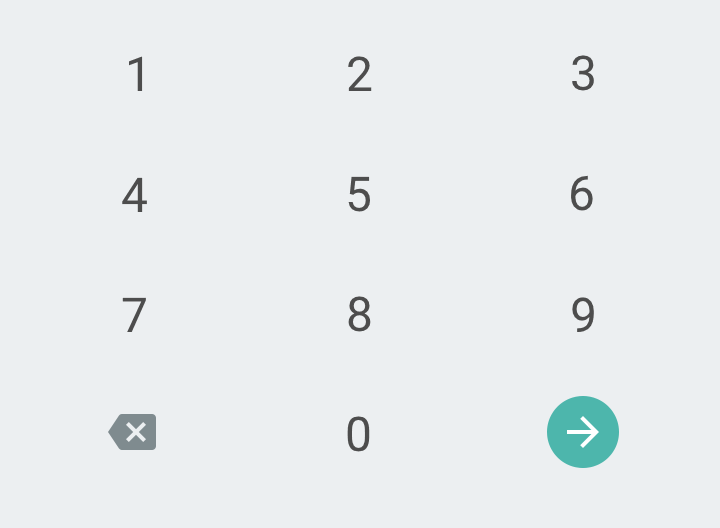
<style>
.page{position:relative;width:720px;height:528px;background:#eceff1}
.page>*{position:absolute;margin:0}
.t1{font:48px "Roboto-Regular";letter-spacing:0.04em;color:#4d4d4d;text-transform:uppercase}
</style>
<div class="page">
<p class="t1" style="left:129px;top:56px;width:14px;height:35px">1</p>
<p class="t1" style="left:348px;top:56px;width:24px;height:35px">2</p>
<p class="t1" style="left:572px;top:55px;width:22px;height:36px">3</p>
<p class="t1" style="left:122px;top:177px;width:25px;height:35px">4</p>
<p class="t1" style="left:348px;top:176px;width:22px;height:36px">5</p>
<p class="t1" style="left:571px;top:175px;width:22px;height:36px">6</p>
<p class="t1" style="left:122px;top:297px;width:24px;height:35px">7</p>
<p class="t1" style="left:348px;top:296px;width:23px;height:36px">8</p>
<p class="t1" style="left:572px;top:297px;width:22px;height:35px">9</p>
<p class="t1" style="left:347px;top:416px;width:23px;height:36px">0</p>
</div>
